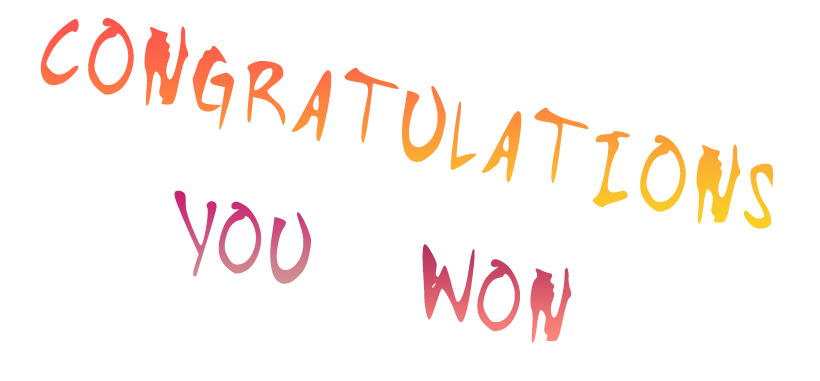
<style>
.page{position:relative;width:820px;height:381px;background:#ffffff}
.page>*{position:absolute;margin:0}
.t1{font:160px "Bustamantefont"}
.t2{font:150px "Bustamantefont"}
</style>
<div class="page">
<p class="t1" style="left:40px;top:18px;width:734px;height:211px;rotate:12deg">CONGRATULATIONS</p>
<p class="t2" style="left:174px;top:190px;width:137px;height:94px;rotate:11deg">YOU</p>
<p class="t2" style="left:422px;top:244px;width:150px;height:99px;rotate:12deg">WON</p>
</div>
